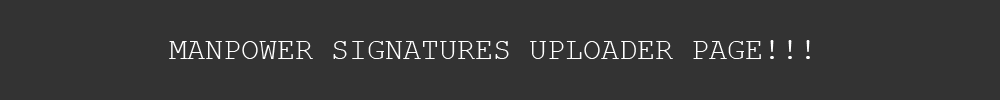
<style>
.page{position:relative;width:1000px;height:100px;background:#333333}
.page>*{position:absolute;margin:0}
.t1{font:30px "CourierNewPSMT";color:#ffffff}
</style>
<div class="page">
<p class="t1" style="left:169px;top:40px;width:641px;height:19px">MANPOWER SIGNATURES UPLOADER PAGE!!!</p>
</div>
